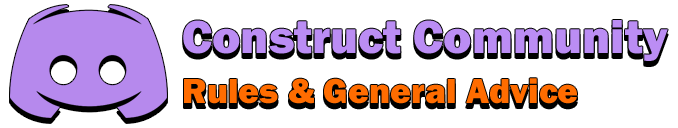
<style>
.page{position:relative;width:678px;height:128px;background:#ffffff}
.page>*{position:absolute;margin:0}
.t1{font:36px/50px "FranklinGothic-Heavy";color:#ff6c00}
.t2{font:48px/50px "FranklinGothic-Heavy";color:#bb8df4}
</style>
<div class="page">
<p class="t1" style="left:183px;top:20px;width:485px;height:84px"><span class="t2">Construct Community<br></span>Rules &amp; General Advice</p>
</div>
